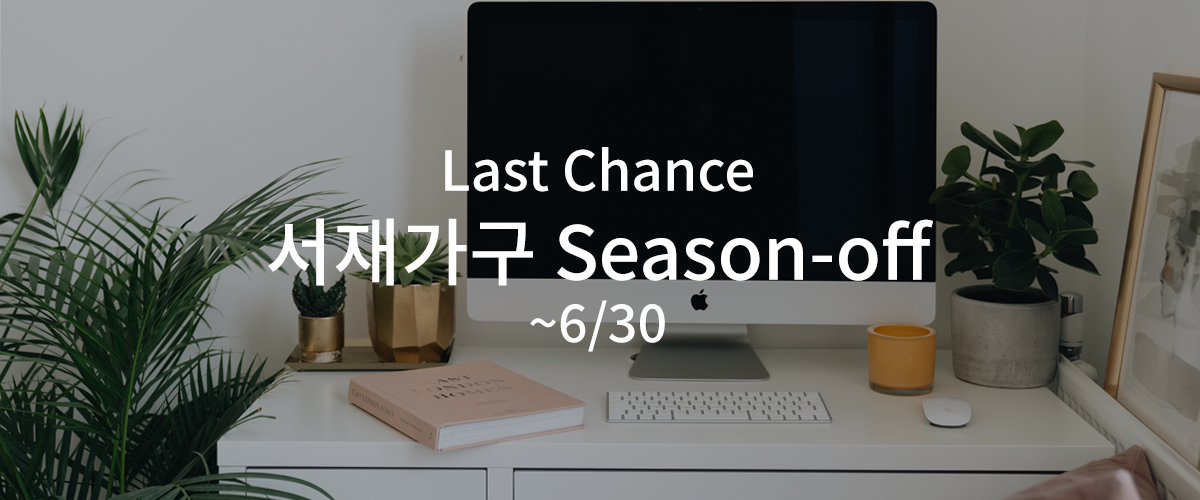
<style>
.page{position:relative;width:1200px;height:500px}
.page>*{position:absolute;margin:0}
.t1{font:74px "NotoSansKR-Medium";color:#ffffff}
.t2{font:55px "NotoSansKR-Medium";color:#ffffff}
.t3{font:52px "NotoSansKR-Medium";color:#ffffff}
</style>
<div class="page">
<p class="t1" style="left:268px;top:147px;width:665px;height:205px;text-align:center"><span class="t2">Last Chance<br></span>서재가구 Season-off<br><span class="t3">~6/30</span></p>
</div>
